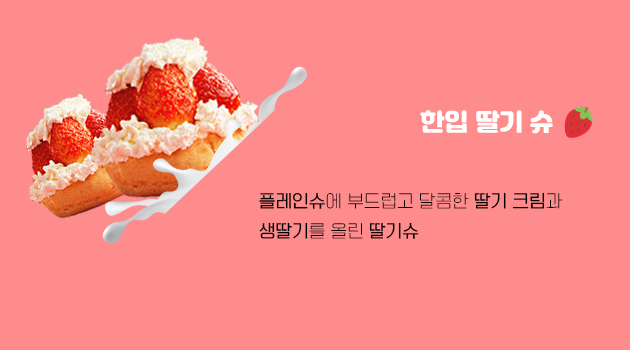
<style>
.page{position:relative;width:630px;height:350px;background:#ff8c8c}
.page>*{position:absolute;margin:0}
.t1{font:24px "Jalnan";color:#ffffff}
.t2{font:17px/30px "TTOmniGothicT";color:#000000}
.t3{font:17px/30px "TTOmniGothicM";color:#000000}
</style>
<div class="page">
<p class="t1" style="left:420px;top:110px;width:133px;height:24px">한입 딸기 슈</p>
<p class="t2" style="left:259px;top:192px;width:304px;height:47px"><span class="t3">플레인슈</span>에 부드럽고 달콤한 <span class="t3">딸기 크림</span>과 <span class="t3">생딸기</span>를 올린 <span class="t3">딸기슈</span></p>
</div>
